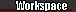
<style>
.page{position:relative;width:76px;height:12px;background:#333333}
.page>*{position:absolute;margin:0}
.t1{font:11px "Impact";color:#ffffff}
</style>
<div class="page">
<p class="t1" style="left:16px;top:1px;width:51px;height:10px">Workspace</p>
</div>
